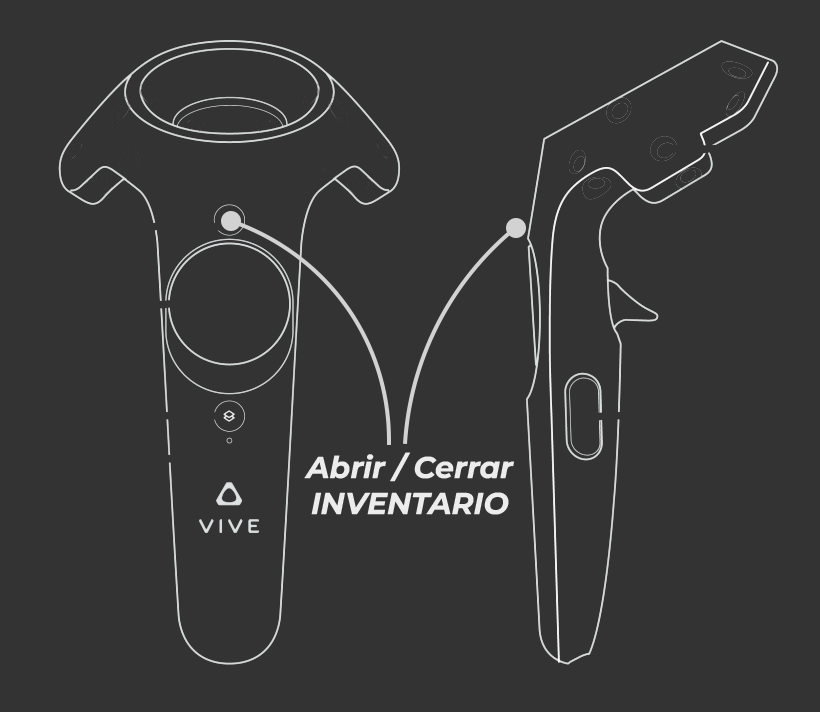
<style>
.page{position:relative;width:820px;height:712px;background:#333333}
.page>*{position:absolute;margin:0}
.t1{font:30px/36px "MontserratItalic-BoldItalic";color:#ececec}
</style>
<div class="page">
<p class="t1" style="left:304px;top:452px;width:210px;height:63px;text-align:center">Abrir / Cerrar<br>INVENTARIO</p>
</div>
